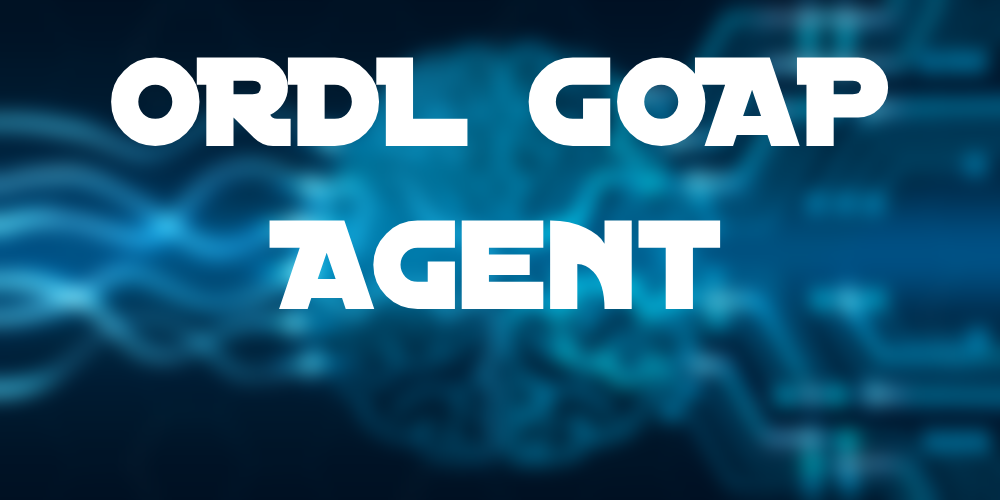
<style>
.page{position:relative;width:1000px;height:500px}
.page>*{position:absolute;margin:0}
.t1{font:136px "DistantGalaxy";color:#ffffff}
</style>
<div class="page">
<p class="t1" style="left:111px;top:57px;width:778px;height:252px;text-align:center">ORDL GOAP<br>Agent</p>
</div>
